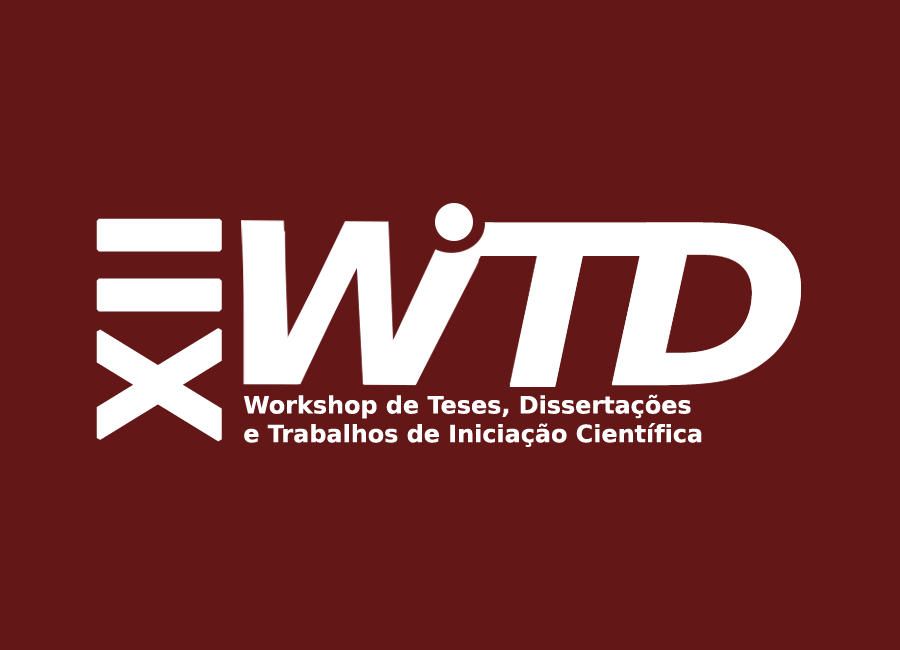
<style>
.page{position:relative;width:900px;height:650px;background:#631717}
.page>*{position:absolute;margin:0}
.t1{font:165.1px "DejaVuSansCondensed-Bold";color:#ffffff;font-weight:bold}
.t2{font:222.1px "DejaVuSansCondensed-BoldOblique";color:#ffffff;scale:1.23 1}
.t3{font:222.9px "DejaVuSansCondensed-BoldOblique";color:#ffffff;scale:1.2 1}
.t4{font:23.9px "DejaVuSans-Bold";color:#ffffff}
</style>
<div class="page">
<p class="t1" style="left:96px;top:218px;width:126px;height:224px;rotate:-90deg">XII</p>
<p class="t2" style="left:612px;top:222px;width:189px;height:163px">D</p>
<p class="t3" style="left:479px;top:224px;width:169px;height:163px">T</p>
<p class="t4" style="left:244px;top:394px;width:458px;height:53px">Workshop de Teses, Dissertações <br>e Trabalhos de Iniciação Científica</p>
</div>
